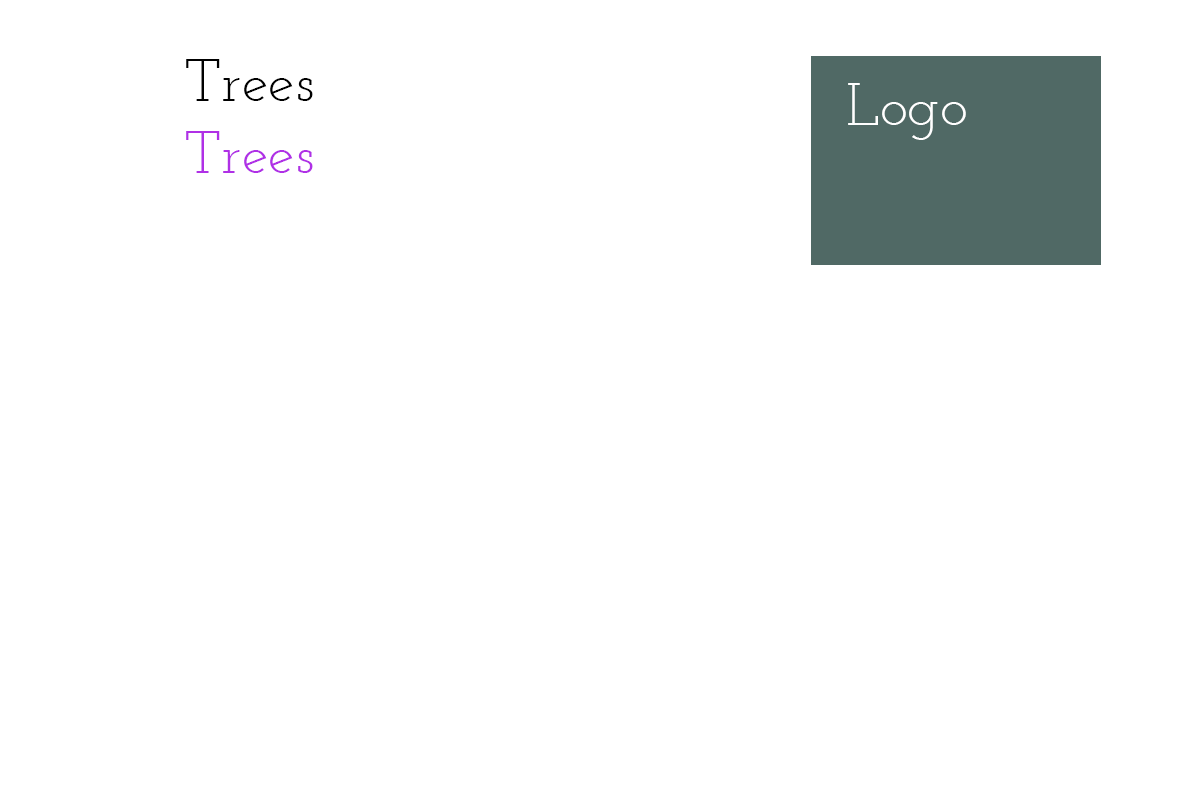
<style>
.page{position:relative;width:1200px;height:800px;background:#ffffff}
.page>*{position:absolute;margin:0}
.t1{font:60px "JosefinSlab";color:#000000}
.t2{font:60px "JosefinSlab";color:#b030e6}
.t3{font:60px "JosefinSlab";color:#ffffff}
</style>
<div class="page">
<p class="t1" style="left:186px;top:59px;width:127px;height:114px">Trees<br><span class="t2">Trees</span></p>
<p class="t3" style="left:848px;top:83px;width:118px;height:57px">Logo</p>
</div>
